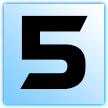
<style>
.page{position:relative;width:108px;height:108px;background:#000000}
.page>*{position:absolute;margin:0}
.t1{font:150px "ROBOTECHGP";color:#000000}
</style>
<div class="page">
<p class="t1" style="left:20px;top:15px;width:68px;height:74px">5</p>
</div>
